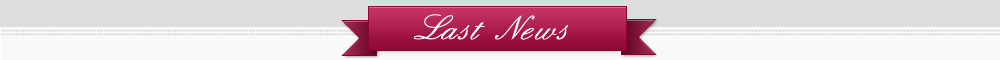
<style>
.page{position:relative;width:1000px;height:60px;background:#f9f9f9}
.page>*{position:absolute;margin:0}
.t1{font:36px "English";letter-spacing:0.02em;color:#ffffff;scale:1.08 1}
</style>
<div class="page">
<p class="t1" style="left:413px;top:14px;width:155px;height:26px">Last  News</p>
</div>
